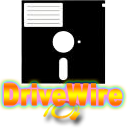
<style>
.page{position:relative;width:128px;height:128px;background:#ffffff}
.page>*{position:absolute;margin:0}
.t1{font:30.4px "Arial-Black";letter-spacing:0.01em;font-weight:bold;scale:0.7 1}
</style>
<div class="page">
<p class="t1" style="left:4px;top:83px;width:119px;height:23px">DriveWire</p>
</div>
